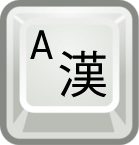
<style>
.page{position:relative;width:139px;height:145px}
.page>*{position:absolute;margin:0}
.t1{font:41.3px "MidoriSans";color:#000000}
.t2{font:49.6px "KozGoPro-Regular";color:#000000}
</style>
<div class="page">
<p class="t1" style="left:30px;top:30px;width:23px;height:29px">A</p>
<p class="t2" style="left:59px;top:50px;width:48px;height:48px">漢</p>
</div>
